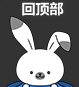
<style>
.page{position:relative;width:79px;height:87px;background:#333333}
.page>*{position:absolute;margin:0}
.t1{font:14px "MicrosoftYaHei-Bold";color:#ffffff}
</style>
<div class="page">
<p class="t1" style="left:22px;top:2px;width:42px;height:14px">回顶部</p>
</div>
